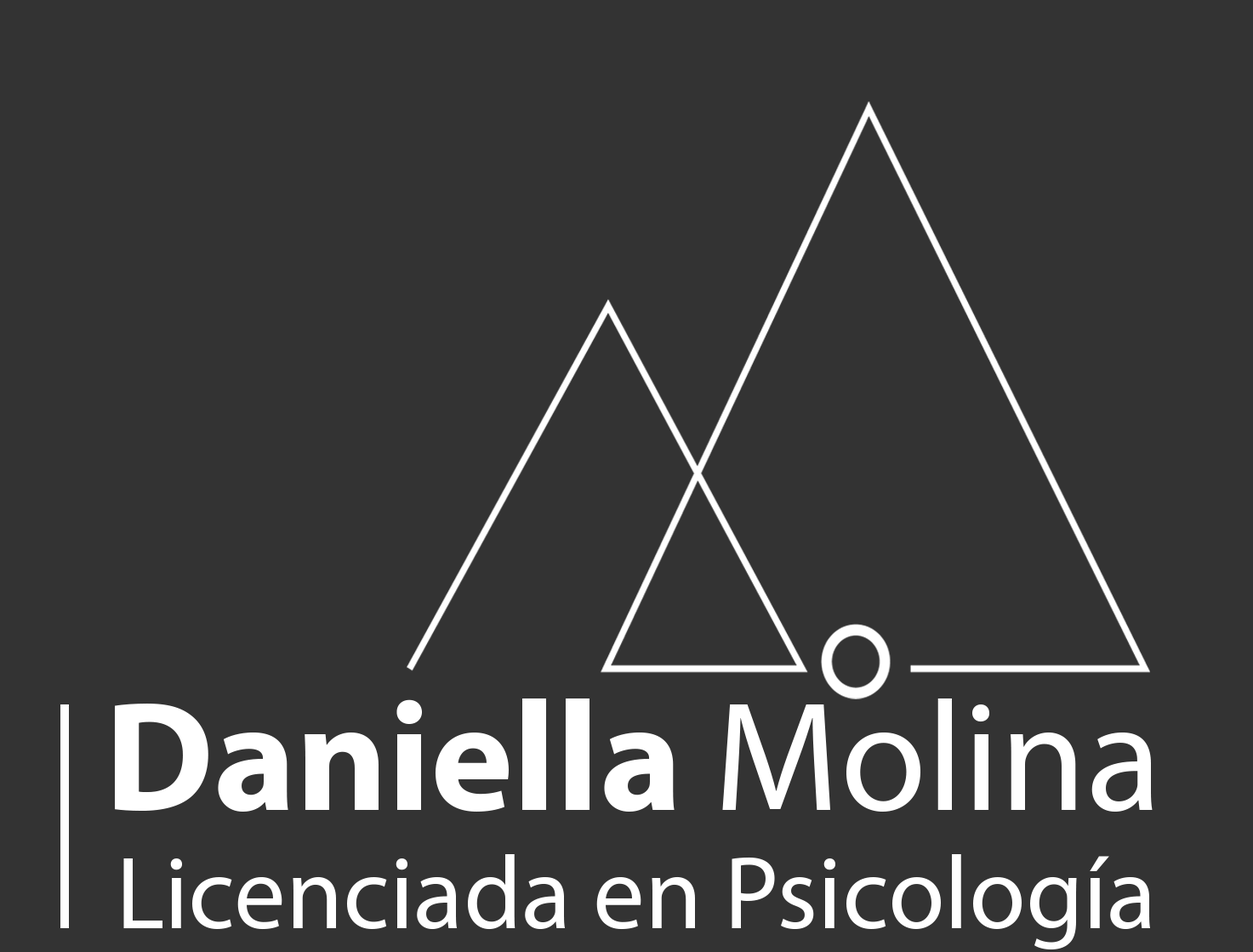
<style>
.page{position:relative;width:1253px;height:952px;background:#333333}
.page>*{position:absolute;margin:0}
.t1{font:156.8px "MyriadPro-Bold";color:#ffffff}
.t2{font:156.8px "MyriadPro-Regular";color:#ffffff}
.t3{font:103.7px "MyriadPro-Regular";color:#ffffff}
</style>
<div class="page">
<p class="t1" style="left:115px;top:698px;width:1037px;height:114px">Daniella <span class="t2">Molina</span></p>
<p class="t3" style="left:123px;top:854px;width:1027px;height:96px">Licenciada en Psicología</p>
</div>
